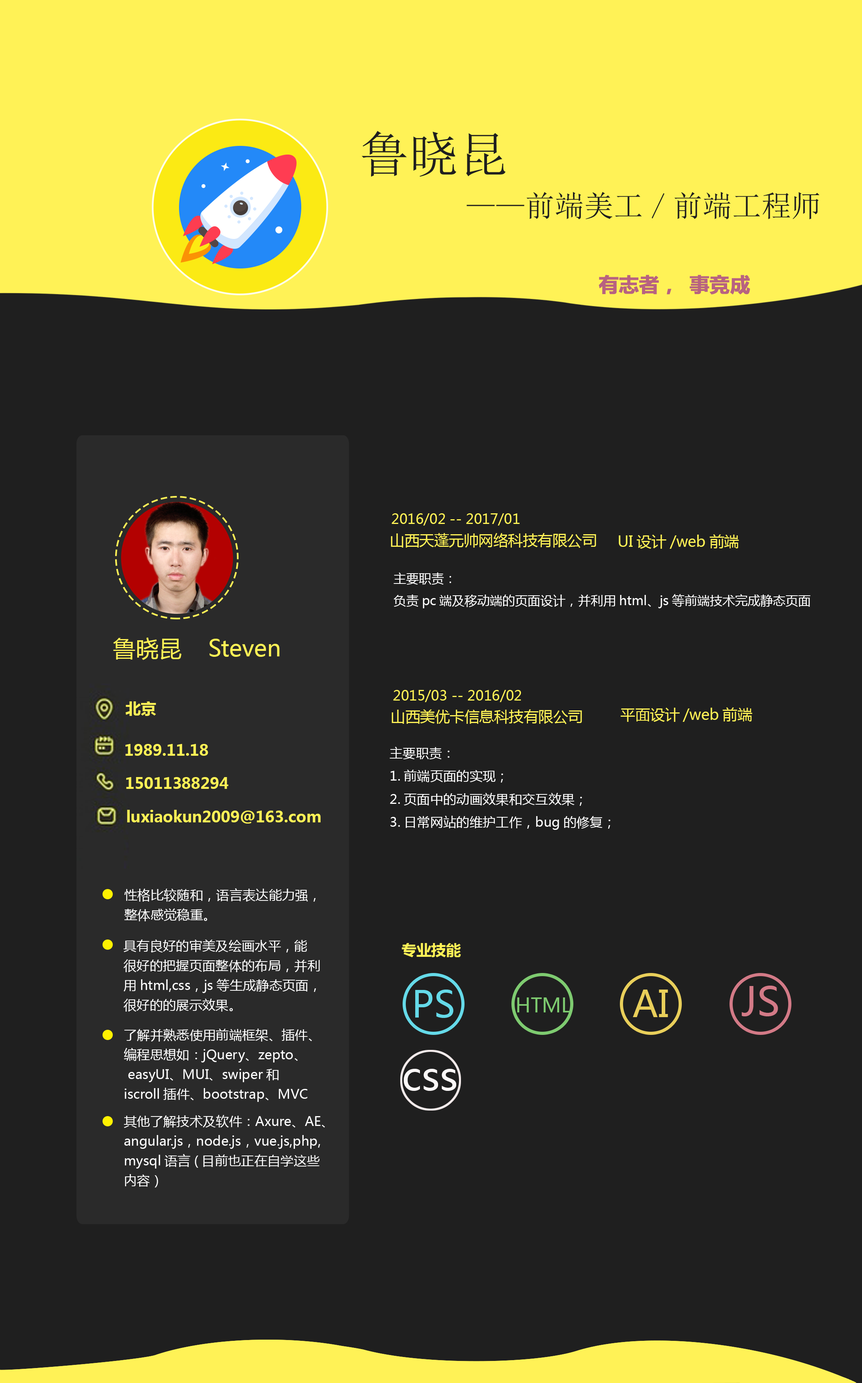
<style>
.page{position:relative;width:862px;height:1383px;background:#1f1f1f}
.page>*{position:absolute;margin:0}
.t1{font:49.3px "SimSun";color:#1f1f1f}
.t2{font:29.6px "SimSun";color:#1f1f1f}
.t3{font:61.6px "SimSun";color:#1f1f1f}
.t4{font:19.7px "MicrosoftYaHei-Bold";color:#b86280;font-weight:bold}
.t5{font:13.8px "MicrosoftYaHei";color:#fff256}
.t6{font:14.8px "MicrosoftYaHei";color:#fff256}
.t7{font:12.6px "MicrosoftYaHei";color:#ffffff}
.t8{font:23px "MicrosoftYaHei";color:#fff256}
.t9{font:15.3px "MicrosoftYaHei-Bold";color:#fff256}
.t10{font:13.1px "MicrosoftYaHei";color:#ffffff}
.t11{font:13.1px/19.7px "MicrosoftYaHei";color:#ffffff}
.t12{font:14.8px "MicrosoftYaHei-Bold";color:#fff256}
.t13{font:36.1px "MicrosoftYaHei";color:#65dae9}
.t14{font:36.1px "MicrosoftYaHei";color:#e9cf5a}
.t15{font:39.4px "MicrosoftYaHei";color:#d37a87}
.t16{font:19.7px "MicrosoftYaHei";color:#7ecb70}
.t17{font:39.4px "MicrosoftYaHei";color:#fbf8f8}
</style>
<div class="page">
<p class="t1" style="left:362px;top:131px;width:144px;height:46px">鲁晓昆</p>
<p class="t2" style="left:466px;top:192px;width:353px;height:28px"><span class="t3"><br></span>——前端美工/前端工程师</p>
<p class="t4" style="left:599px;top:275px;width:151px;height:20px">有志者，事竞成</p>
<p class="t5" style="left:392px;top:513px;width:128px;height:13px">2016/02 -- 2017/01</p>
<p class="t6" style="left:391px;top:533px;width:205px;height:15px">山西天蓬元帅网络科技有限公司</p>
<p class="t6" style="left:619px;top:534px;width:120px;height:15px">UI设计/web前端</p>
<p class="t7" style="left:394px;top:573px;width:416px;height:35px;text-align:justify">主要职责：<br>负责pc端及移动端的页面设计，并利用html、js等前端技术完成静态页面</p>
<p class="t8" style="left:113px;top:638px;width:68px;height:22px">鲁晓昆</p>
<p class="t8" style="left:209px;top:639px;width:71px;height:18px">Steven</p>
<p class="t9" style="left:125px;top:702px;width:31px;height:14px">北京</p>
<p class="t5" style="left:393px;top:690px;width:128px;height:12px">2015/03 -- 2016/02</p>
<p class="t6" style="left:392px;top:709px;width:190px;height:15px">山西美优卡信息科技有限公司</p>
<p class="t6" style="left:621px;top:707px;width:131px;height:15px">平面设计/web前端</p>
<p class="t9" style="left:125px;top:744px;width:83px;height:12px">1989.11.18</p>
<p class="t10" style="left:390px;top:747px;width:220px;height:83px">主要职责：<br>1.前端页面的实现；<br>2.页面中的动画效果和交互效果；<br>3.日常网站的维护工作，bug的修复；</p>
<p class="t9" style="left:126px;top:777px;width:102px;height:12px">15011388294</p>
<p class="t9" style="left:127px;top:810px;width:194px;height:14px">luxiaokun2009@163.com</p>
<p class="t11" style="left:124px;top:888px;width:192px;height:34px">性格比较随和，语言表达能力强，<br>整体感觉稳重。</p>
<p class="t11" style="left:123px;top:940px;width:197px;height:72px">具有良好的审美及绘画水平，能<br>很好的把握页面整体的布局，并利<br>用html,css，js等生成静态页面，<br>很好的的展示效果。</p>
<p class="t12" style="left:402px;top:943px;width:59px;height:14px">专业技能</p>
<p class="t13" style="left:415px;top:990px;width:38px;height:28px">PS</p>
<p class="t14" style="left:633px;top:990px;width:35px;height:27px">AI</p>
<p class="t15" style="left:742px;top:986px;width:36px;height:31px">JS</p>
<p class="t16" style="left:517px;top:998px;width:54px;height:15px">HTML</p>
<p class="t11" style="left:124px;top:1029px;width:188px;height:73px">了解并熟悉使用前端框架、插件、<br>编程思想如：jQuery、zepto、<br> easyUI、MUI、swiper和<br>iscroll插件、bootstrap、MVC</p>
<p class="t17" style="left:403px;top:1069px;width:53px;height:22px">css</p>
<p class="t11" style="left:124px;top:1115px;width:201px;height:73px">其他了解技术及软件：Axure、AE、<br>angular.js，node.js，vue.js,php,<br>mysql语言(目前也正在自学这些<br>内容）</p>
</div>
